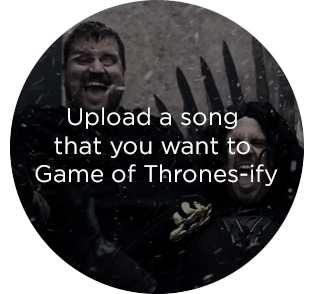
<style>
.page{position:relative;width:314px;height:294px;background:#ffffff}
.page>*{position:absolute;margin:0}
.t1{font:24px "Gotham-Book";color:#ffffff}
</style>
<div class="page">
<p class="t1" style="left:35px;top:107px;width:243px;height:79px;text-align:center">Upload a song <br>that you want to <br>Game of Thrones-ify</p>
</div>
